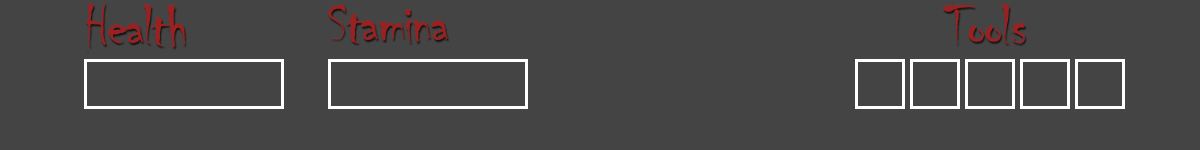
<style>
.page{position:relative;width:1200px;height:150px;background:#444444}
.page>*{position:absolute;margin:0}
.t1{font:59.8px "Chiller-Regular";letter-spacing:-0.025em;color:#992122}
</style>
<div class="page">
<p class="t1" style="left:86px;top:3px;width:99px;height:48px">Health</p>
<p class="t1" style="left:328px;top:4px;width:120px;height:39px">Stamina</p>
<p class="t1" style="left:943px;top:0px;width:82px;height:44px">Tools</p>
</div>
